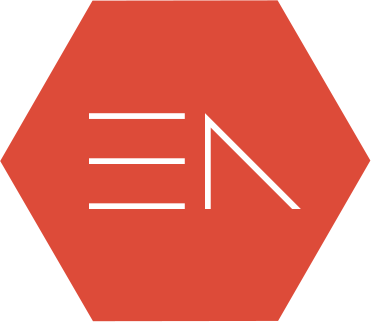
<style>
.page{position:relative;width:371px;height:322px;background:#dd4b39}
.page>*{position:absolute;margin:0}
.t1{font:180.2px "Vermin-Vibes-Diet";letter-spacing:0.08em;color:#ffffff}
</style>
<div class="page">
<p class="t1" style="left:89px;top:113px;width:212px;height:96px">EA</p>
</div>
